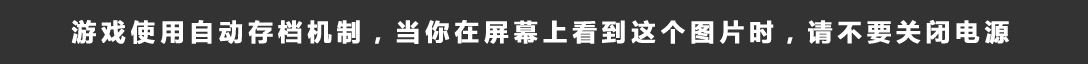
<style>
.page{position:relative;width:1088px;height:64px;background:#333333}
.page>*{position:absolute;margin:0}
.t1{font:24px "MicrosoftYaHei-Bold";letter-spacing:0.2em;color:#ffffff;font-weight:bold}
</style>
<div class="page">
<p class="t1" style="left:71px;top:20px;width:938px;height:24px">游戏使用自动存档机制，当你在屏幕上看到这个图片时，请不要关闭电源</p>
</div>
